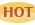
<style>
.page{position:relative;width:35px;height:25px;background:#f7ca69}
.page>*{position:absolute;margin:0}
.t1{font:14px "Tahoma-Bold";color:#bd582b}
</style>
<div class="page">
<p class="t1" style="left:4px;top:7px;width:30px;height:10px">HOT</p>
</div>
